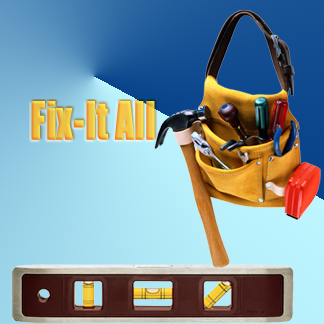
<style>
.page{position:relative;width:324px;height:324px}
.page>*{position:absolute;margin:0}
.t1{font:48px "Impact";font-weight:bold;scale:0.75 1}
</style>
<div class="page">
<p class="t1" style="left:31px;top:101px;width:124px;height:39px">Fix-It All</p>
</div>
